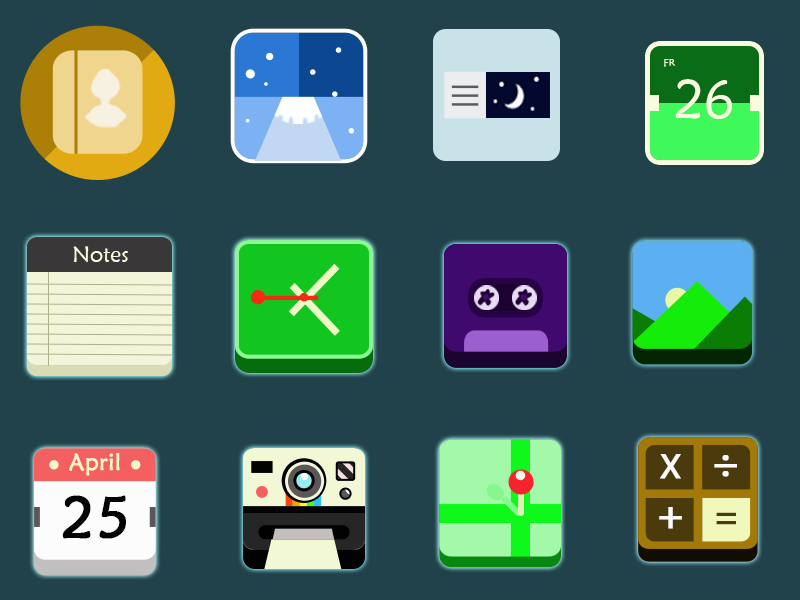
<style>
.page{position:relative;width:800px;height:600px;background:#21424b}
.page>*{position:absolute;margin:0}
.t1{font:10px "STXinwei";color:#f9fbdf}
.t2{font:54.1px "STXinwei";color:#f9fbdf}
.t3{font:22.2px "STXinwei";color:#f9fbdf}
.t4{font:23.8px "STXinwei";color:#f9f6cc;font-weight:bold}
.t5{font:31.8px "MicrosoftYaHei";color:#fcfafa;font-weight:bold}
.t6{font:42.4px "MicrosoftYaHei";color:#fcfafa;font-weight:bold}
.t7{font:37.1px "MicrosoftYaHei";color:#4b3a0b;font-weight:bold}
.t8{font:57.7px "STXinwei";color:#040404;font-weight:bold}
</style>
<div class="page">
<p class="t1" style="left:664px;top:59px;width:12px;height:8px">FR</p>
<p class="t2" style="left:675px;top:79px;width:57px;height:40px">26</p>
<p class="t3" style="left:73px;top:246px;width:55px;height:17px">Notes</p>
<p class="t4" style="left:69px;top:453px;width:51px;height:23px">April</p>
<p class="t5" style="left:660px;top:454px;width:21px;height:25px">X</p>
<p class="t6" style="left:714px;top:455px;width:23px;height:22px"><span class="t7"> </span>÷</p>
<p class="t8" style="left:62px;top:495px;width:64px;height:44px">25</p>
<p class="t6" style="left:659px;top:507px;width:23px;height:22px">+</p>
<p class="t7" style="left:716px;top:512px;width:20px;height:13px">=</p>
</div>
